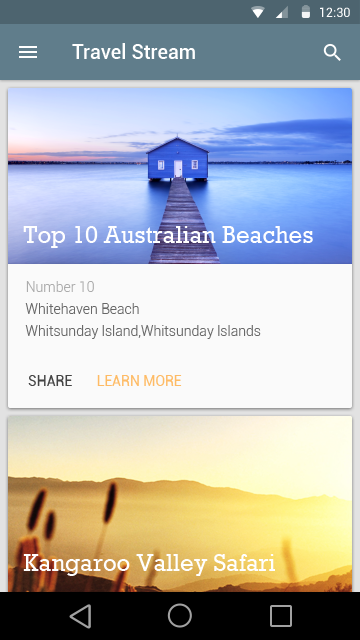
<style>
.page{position:relative;width:360px;height:640px;background:#fafafa}
.page>*{position:absolute;margin:0}
.t1{font:12.7px "Roboto-Regular";color:#ffffff}
.t2{font:20px "Roboto-Medium";color:#ffffff}
.t3{font:24px "Rockwell";color:#ffffff}
.t4{font:14px "Roboto-Light";color:#acacac}
.t5{font:14px/22px "Roboto-Light";color:#686868}
.t6{font:14px "Roboto-Regular";color:#444444}
.t7{font:14px "Roboto-Regular";color:#febb65}
</style>
<div class="page">
<p class="t1" style="left:320px;top:7px;width:30px;height:10px">12:30</p>
<p class="t2" style="left:72px;top:43px;width:123px;height:16px">Travel Stream</p>
<p class="t3" style="left:23px;top:226px;width:290px;height:22px">Top 10 Australian Beaches</p>
<p class="t4" style="left:26px;top:281px;width:68px;height:11px">Number 10</p>
<p class="t5" style="left:25px;top:303px;width:236px;height:36px">Whitehaven Beach<br>Whitsunday lsland,Whitsunday lslands</p>
<p class="t6" style="left:28px;top:375px;width:44px;height:11px">SHARE</p>
<p class="t7" style="left:97px;top:375px;width:85px;height:11px">LEARN MORE</p>
<p class="t3" style="left:23px;top:554px;width:252px;height:22px">Kangaroo Valley Safari</p>
</div>
